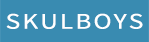
<style>
.page{position:relative;width:149px;height:42px;background:#398bb1}
.page>*{position:absolute;margin:0}
.t1{font:22.2px "SourceSansPro-Regular";color:#ffffff;scale:1.23 1}
</style>
<div class="page">
<p class="t1" style="left:6px;top:13px;width:137px;height:16px">S K U L B O Y S</p>
</div>
